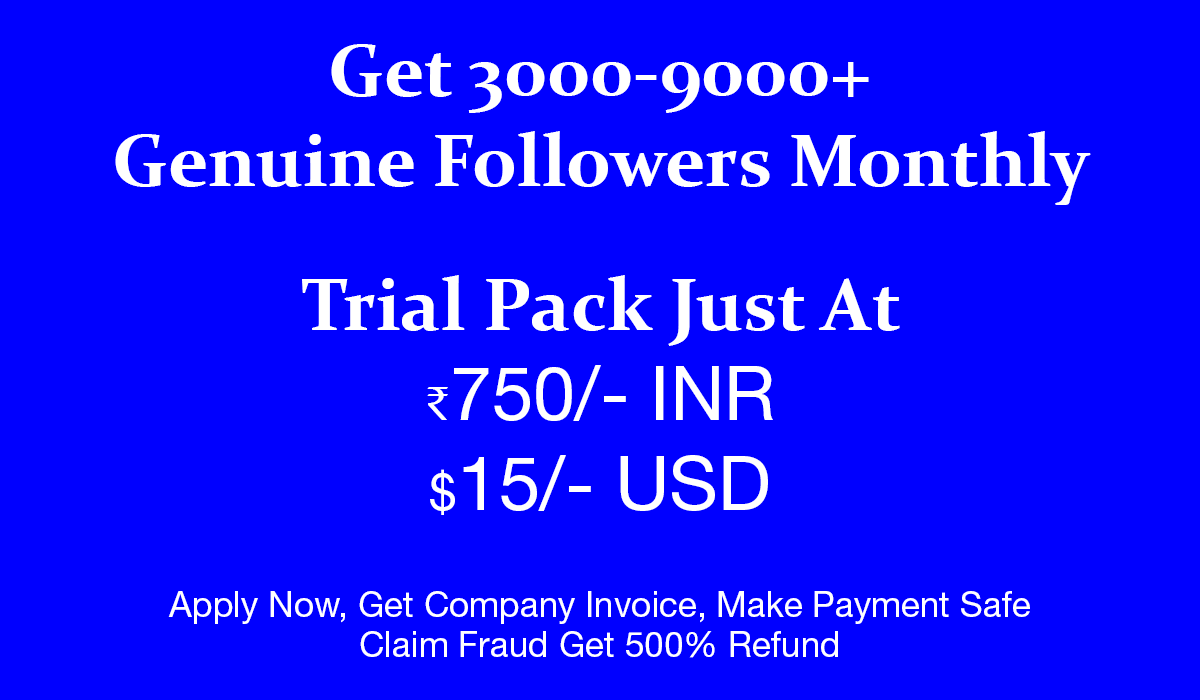
<style>
.page{position:relative;width:1200px;height:700px;background:#0000ff}
.page>*{position:absolute;margin:0}
.t1{font:75px/9px "Constantia-Bold";color:#ffffff}
.t2{font:50px/9px "TimesNewRomanPSMT";color:#ffffff}
.t3{font:75px/9px "HelveticaNeueLTStd-Roman";color:#ffffff}
.t4{font:50px/9px "HelveticaNeueLTStd-Roman";color:#ffffff}
.t5{font:35px/40px "HelveticaNeueLTStd-Roman";color:#ffffff}
</style>
<div class="page">
<p class="t1" style="left:115px;top:44px;width:976px;height:614px;text-align:center">Get 3000-9000+<br><br><br><br><br><br><br><br><br><br>Genuine Followers Monthly<br><br><br><br><br><br><br><br><br><br><br><br><br><br><br><br>Trial Pack Just At<br><br><br><br><br><br><br><br><br><br><span class="t2">₹</span><span class="t3">750/- INR<br><br><br><br><br><br><br><br><br><br></span><span class="t4">$</span><span class="t3">15/- USD<br><br><br><br></span><span class="t5"><br>Apply Now, Get Company Invoice, Make Payment Safe<br>Claim Fraud Get 500% Refund</span></p>
</div>
